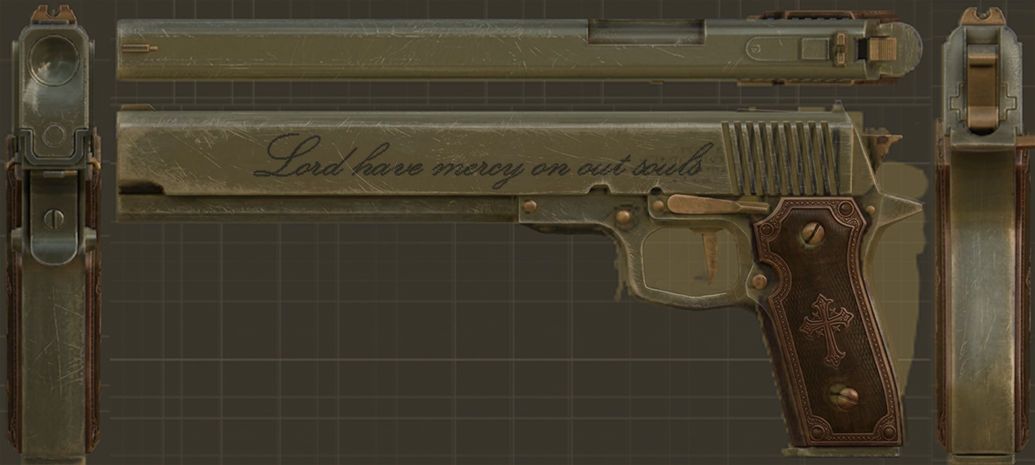
<style>
.page{position:relative;width:1035px;height:465px}
.page>*{position:absolute;margin:0}
.t1{font:60px "KunstlerScript";color:#2b2921}
</style>
<div class="page">
<p class="t1" style="left:254px;top:134px;width:459px;height:55px">Lord have mercy on out souls</p>
</div>
